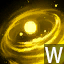
<style>
.page{position:relative;width:64px;height:64px}
.page>*{position:absolute;margin:0}
.t1{font:20px "AdobeFanHeitiStd-Bold";color:#ffffff}
</style>
<div class="page">
<p class="t1" style="left:45px;top:47px;width:18px;height:16px">W</p>
</div>
